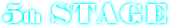
<style>
.page{position:relative;width:174px;height:26px;background:#ffffff}
.page>*{position:absolute;margin:0}
.t1{font:17.6px "NormandeBT-Roman";letter-spacing:-0.05em;color:#ffffff}
.t2{font:26.4px "NormandeBT-Roman";letter-spacing:-0.05em;color:#ffffff}
.t3{font:26.4px "NormandeBT-Roman";letter-spacing:0.05em;color:#ffffff}
.t4{font:26.4px "NormandeBT-Roman";letter-spacing:-0.1em;color:#ffffff}
</style>
<div class="page">
<p class="t1" style="left:3px;top:4px;width:38px;height:19px"><span class="t2">5</span>th</p>
<p class="t3" style="left:51px;top:3px;width:115px;height:20px"><span class="t4"> </span>STAGE</p>
</div>
